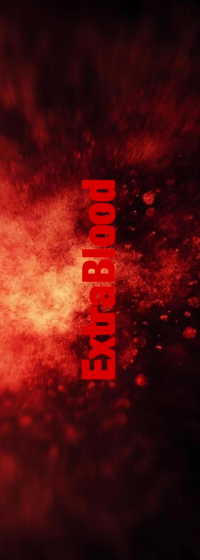
<style>
.page{position:relative;width:200px;height:560px}
.page>*{position:absolute;margin:0}
.t1{font:45px "HelveticaNeueBlackCondensed";color:#d70000}
</style>
<div class="page">
<p class="t1" style="left:82px;top:180px;width:33px;height:199px;rotate:-90deg">ExtraBlood</p>
</div>
